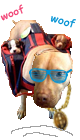
<style>
.page{position:relative;width:80px;height:140px;background:#ffffff}
.page>*{position:absolute;margin:0}
.t1{font:10.2px "ComicSansMS";color:#f14374;scale:1.1 1}
.t2{font:10.2px "ComicSansMS";color:#0091d3;scale:1.1 1}
</style>
<div class="page">
<p class="t1" style="left:0px;top:4px;width:24px;height:17px;rotate:-23deg">woof</p>
<p class="t2" style="left:50px;top:16px;width:26px;height:12px;rotate:14deg">woof</p>
</div>
